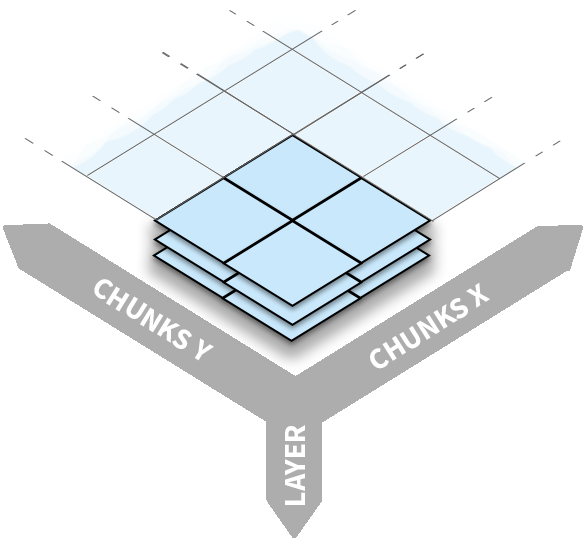
<style>
.page{position:relative;width:587px;height:541px;background:#ffffff}
.page>*{position:absolute;margin:0}
.t1{font:30px "SourceSansPro-Bold";color:#ffffff}
</style>
<div class="page">
<p class="t1" style="left:94px;top:279px;width:120px;height:82px;rotate:32deg">CHUNKS Y</p>
<p class="t1" style="left:370px;top:282px;width:120px;height:87px;rotate:-32deg">CHUNKS X</p>
<p class="t1" style="left:285px;top:425px;width:20px;height:80px;rotate:-90deg">LAYER</p>
</div>
